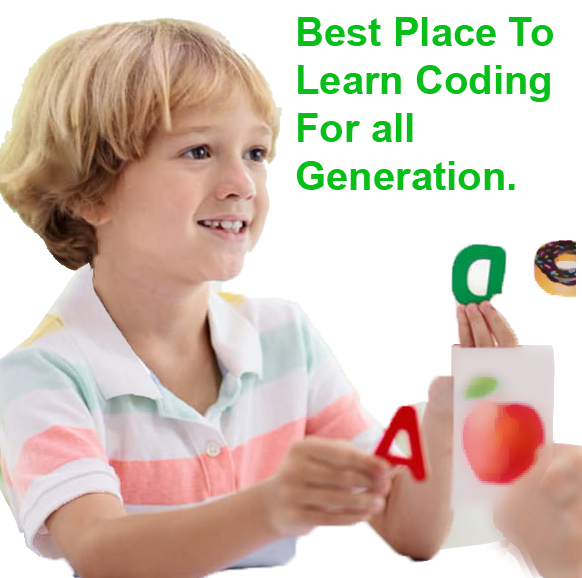
<style>
.page{position:relative;width:582px;height:578px;background:#ffffff}
.page>*{position:absolute;margin:0}
.t1{font:40px "Arial-BoldMT";color:#08bf19}
</style>
<div class="page">
<p class="t1" style="left:296px;top:17px;width:257px;height:173px">Best Place To Learn Coding <br>For all <br>Generation.</p>
</div>
